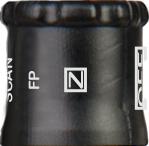
<style>
.page{position:relative;width:149px;height:146px}
.page>*{position:absolute;margin:0}
.t1{font:10.6px "ArialRoundedMTBold";letter-spacing:-0.01em;color:#e1e4e3;scale:2.7 1}
.t2{font:11.8px "ArialRoundedMTBold";letter-spacing:-0.01em;color:#e1e4e3;scale:1.36 1}
.t3{font:14.7px "ArialRoundedMTBold";letter-spacing:-0.01em;color:#e1e4e3;scale:1.09 1}
.t4{font:19.9px "ArialRoundedMTBold";letter-spacing:-0.01em;color:#e1e4e3;scale:1.44 1}
</style>
<div class="page">
<p class="t1" style="left:138px;top:52px;width:8px;height:55px;rotate:-90deg">OFF</p>
<p class="t2" style="left:3px;top:58px;width:10px;height:44px;rotate:-90deg">SCAN</p>
<p class="t3" style="left:28px;top:70px;width:12px;height:19px;rotate:-90deg">FP</p>
<p class="t4" style="left:68px;top:70px;width:15px;height:19px;rotate:-90deg">Z</p>
</div>
